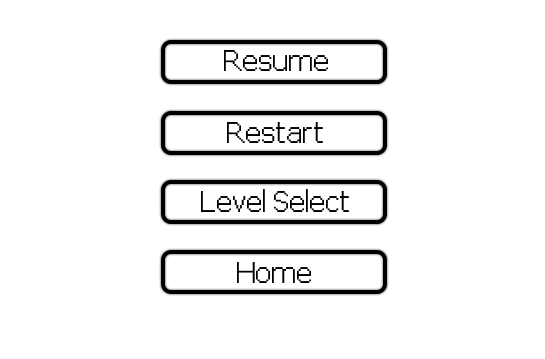
<style>
.page{position:relative;width:545px;height:359px;background:#ffffff}
.page>*{position:absolute;margin:0}
.t1{font:14px "pix-PixelFJVerdana12pt-Regular";color:#000000}
</style>
<div class="page">
<p class="t1" style="left:224px;top:50px;width:104px;height:21px">Resume</p>
<p class="t1" style="left:227px;top:122px;width:96px;height:21px">Restart</p>
<p class="t1" style="left:201px;top:189px;width:148px;height:23px">Level Select</p>
<p class="t1" style="left:237px;top:262px;width:74px;height:21px">Home</p>
</div>
